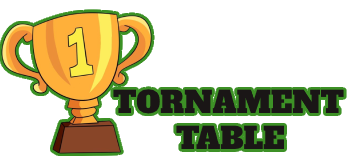
<style>
.page{position:relative;width:350px;height:160px;background:#ffffff}
.page>*{position:absolute;margin:0}
.t1{font:30px "AlfaSlabOne-Regular";color:#1a1616}
</style>
<div class="page">
<p class="t1" style="left:113px;top:89px;width:231px;height:60px">TORNAMENT<br>       TABLE</p>
</div>
